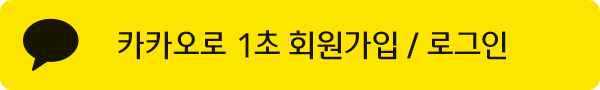
<style>
.page{position:relative;width:600px;height:90px;background:#fee500}
.page>*{position:absolute;margin:0}
.t1{font:32.8px "OTWelcomeR";color:#191600}
</style>
<div class="page">
<p class="t1" style="left:118px;top:30px;width:388px;height:30px">카카오로 1초 회원가입 / 로그인</p>
</div>
